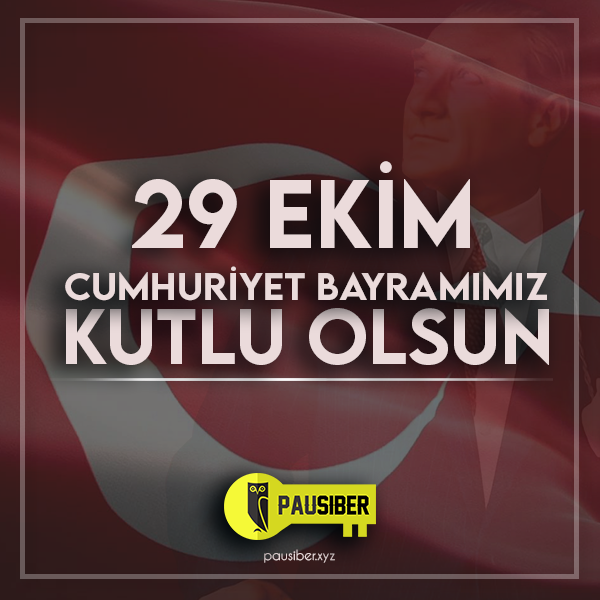
<style>
.page{position:relative;width:600px;height:600px}
.page>*{position:absolute;margin:0}
.t1{font:86.2px "LEMONMILK-Medium";color:#ebdbdb}
.t2{font:33.6px "LEMONMILK-Medium";color:#ebdbdb;scale:1.08 1}
.t3{font:69.5px "LEMONMILK-Medium";color:#ebdbdb}
.t4{font:13.1px "CaviarDreams";color:#ebdbdb}
</style>
<div class="page">
<p class="t1" style="left:132px;top:161px;width:338px;height:87px">29 EKİM</p>
<p class="t2" style="left:65px;top:266px;width:482px;height:35px">cUMHURİYET bayramimiz</p>
<p class="t3" style="left:66px;top:308px;width:483px;height:57px">KUTLU OLSUN</p>
<p class="t4" style="left:264px;top:549px;width:71px;height:14px">pausiber.xyz</p>
</div>
